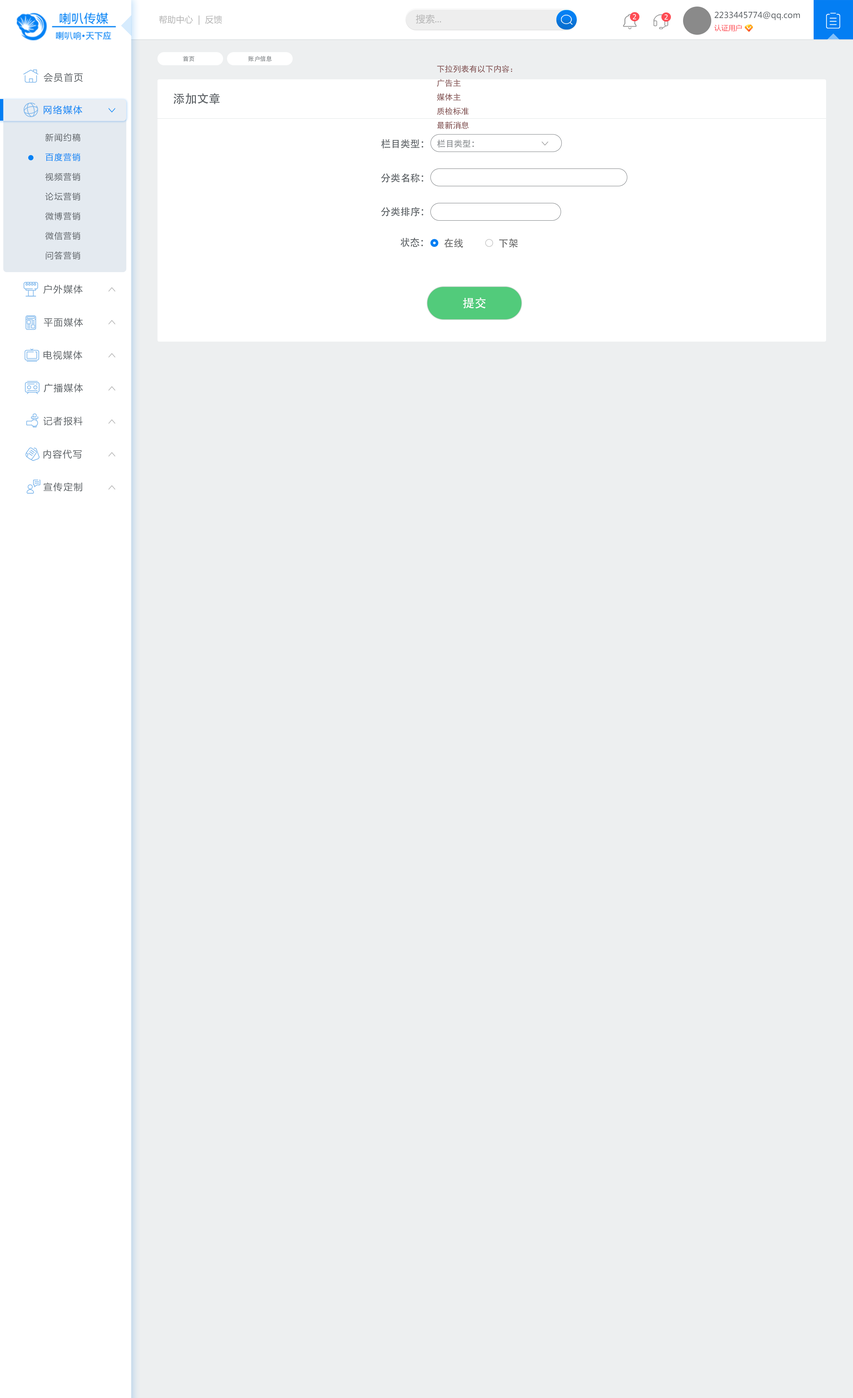
<style>
.page{position:relative;width:853px;height:1398px;background:#edeff0}
.page>*{position:absolute;margin:0}
.t1{font:8.6px "MicrosoftYaHei";color:#b4b4b4}
.t2{font:9.4px "MicrosoftYaHei";color:#b4b4b4}
.t3{font:6.9px "Tahoma";letter-spacing:0.1em;color:#ffffff;text-transform:uppercase}
.t4{font:8.2px/12.3px "MicrosoftYaHei";color:#5c6165}
.t5{font:7.1px/12.3px "MicrosoftYaHei";color:#fe4d55}
.t6{font:5.9px "AdobeHeitiStd-Regular";color:#878b8e}
.t7{font:8.1px "SimHei";color:#825050}
.t8{font:9.2px "MicrosoftYaHei";letter-spacing:0.1em;color:#5c6165}
.t9{font:11.8px "AdobeHeitiStd-Regular";color:#5c6165}
.t10{font:9.2px "MicrosoftYaHei";letter-spacing:0.1em;color:#0582f5}
.t11{font:8.2px/19.7px "MicrosoftYaHei";letter-spacing:0.1em;color:#5c6165}
.t12{font:8.2px/19.7px "MicrosoftYaHei";letter-spacing:0.1em;color:#0381f5}
.t13{font:9.8px "AdobeHeitiStd-Regular";color:#5c6165}
.t14{font:8.5px "AdobeHeitiStd-Regular";color:#878b8e}
.t15{font:9.8px "AdobeHeitiStd-Regular";color:#696969}
.t16{font:11.8px "AdobeHeitiStd-Regular";color:#fefefe}
</style>
<div class="page">
<p class="t1" style="left:159px;top:15px;width:63px;height:10px">帮助中心  |  反馈</p>
<p class="t2" style="left:416px;top:14px;width:25px;height:10px">搜索...</p>
<p class="t3" style="left:633px;top:14px;width:3px;height:5px">2</p>
<p class="t3" style="left:664px;top:14px;width:4px;height:6px">2</p>
<p class="t4" style="left:714px;top:11px;width:86px;height:20px">2233445774@qq.com<br><span class="t5">认证用户</span></p>
<p class="t6" style="left:183px;top:56px;width:11px;height:6px">首页</p>
<p class="t6" style="left:248px;top:56px;width:24px;height:6px">账户信息</p>
<p class="t7" style="left:437px;top:65px;width:75px;height:64px">下拉列表有以下内容：<br>广告主<br>媒体主<br>质检标准<br>最新消息</p>
<p class="t8" style="left:44px;top:73px;width:39px;height:9px">会员首页</p>
<p class="t9" style="left:173px;top:93px;width:47px;height:11px">添加文章</p>
<p class="t10" style="left:44px;top:105px;width:38px;height:9px">网络媒体</p>
<p class="t11" style="left:45px;top:133px;width:35px;height:127px">新闻约稿<br><span class="t12">百度营销<br></span>视频营销<br>论坛营销<br>微博营销<br>微信营销<br>问答营销</p>
<p class="t13" style="left:381px;top:139px;width:42px;height:10px">栏目类型：</p>
<p class="t14" style="left:437px;top:140px;width:37px;height:8px">栏目类型：</p>
<p class="t13" style="left:381px;top:173px;width:42px;height:10px">分类名称：</p>
<p class="t13" style="left:381px;top:207px;width:42px;height:9px">分类排序：</p>
<p class="t13" style="left:400px;top:238px;width:23px;height:9px">状态：</p>
<p class="t15" style="left:444px;top:238px;width:19px;height:10px">在线</p>
<p class="t15" style="left:499px;top:238px;width:19px;height:10px">下架</p>
<p class="t8" style="left:43px;top:285px;width:40px;height:9px">户外媒体</p>
<p class="t16" style="left:463px;top:297px;width:22px;height:12px">提交</p>
<p class="t8" style="left:44px;top:318px;width:39px;height:9px">平面媒体</p>
<p class="t8" style="left:43px;top:351px;width:39px;height:9px">电视媒体</p>
<p class="t8" style="left:44px;top:383px;width:39px;height:10px">广播媒体</p>
<p class="t8" style="left:43px;top:417px;width:40px;height:9px">记者报料</p>
<p class="t8" style="left:43px;top:450px;width:39px;height:9px">内容代写</p>
<p class="t8" style="left:43px;top:482px;width:39px;height:10px">宣传定制</p>
</div>
